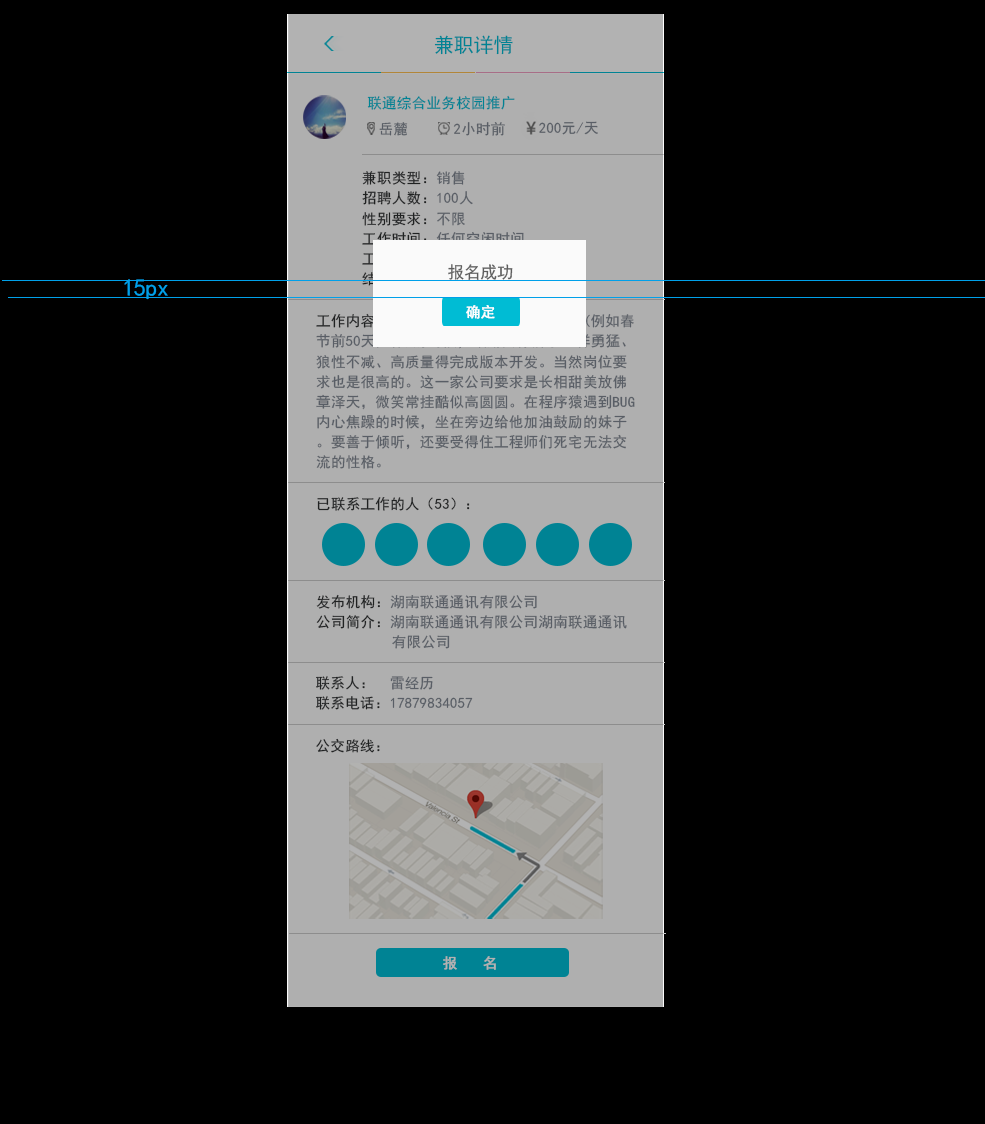
<style>
.page{position:relative;width:985px;height:1124px;background:#000000}
.page>*{position:absolute;margin:0}
.t1{font:20.1px "SimHei";letter-spacing:-0.02em;color:#008394}
.t2{font:14.5px "SimHei";letter-spacing:0.02em;color:#008394}
.t3{font:14.5px "SimHei";letter-spacing:0.02em;color:#595e66}
.t4{font:14.5px/20.1px "SimHei";letter-spacing:0.02em}
.t5{font:16.8px "SimHei";letter-spacing:-0.02em;color:#5d5d5d}
.t6{font:24px "SimHei";letter-spacing:-0.02em;color:#00a0e9}
.t7{font:14.5px "SimHei";letter-spacing:0.02em;color:#ffffff;font-weight:bold}
.t8{font:14.5px/20.1px "SimHei";letter-spacing:0.02em;color:#595e66}
.t9{font:14.5px "SimHei";letter-spacing:0.02em;color:#2e3031}
.t10{font:14.5px "SimHei";letter-spacing:0.02em;color:#b2b2b2;font-weight:bold}
</style>
<div class="page">
<p class="t1" style="left:434px;top:35px;width:79px;height:20px">兼职详情</p>
<p class="t2" style="left:367px;top:95px;width:148px;height:15px">联通综合业务校园推广</p>
<p class="t3" style="left:379px;top:122px;width:29px;height:14px">岳麓</p>
<p class="t3" style="left:453px;top:122px;width:52px;height:14px">2小时前</p>
<p class="t3" style="left:539px;top:121px;width:59px;height:14px">200元/天</p>
<p class="t4" style="left:362px;top:171px;width:162px;height:115px">兼职类型：销售<br>招聘人数：100人<br>性别要求：不限<br>工作时间：任何空闲时间<br>工作集合地点：桃花岭<br>结算方式：周结</p>
<p class="t5" style="left:448px;top:264px;width:65px;height:16px">报名成功</p>
<p class="t6" style="left:124px;top:279px;width:44px;height:21px">15px</p>
<p class="t7" style="left:466px;top:305px;width:29px;height:14px">确定</p>
<p class="t8" style="left:316px;top:313px;width:319px;height:156px">工作内容：鼓励程序员、攻城狮长期干活(例如春节前50天无休)的时候，鼓励其像狮子一样勇猛、狼性不减、高质量得完成版本开发。当然岗位要求也是很高的。这一家公司要求是长相甜美放佛章泽天，微笑常挂酷似高圆圆。在程序猿遇到BUG内心焦躁的时候，坐在旁边给他加油鼓励的妹子。要善于倾听，还要受得住工程师们死宅无法交流的性格。</p>
<p class="t9" style="left:317px;top:497px;width:153px;height:14px">已联系工作的人（53）：</p>
<p class="t8" style="left:316px;top:594px;width:311px;height:55px">发布机构：湖南联通通讯有限公司<br>公司简介：湖南联通通讯有限公司湖南联通通讯          有限公司</p>
<p class="t4" style="left:316px;top:676px;width:157px;height:34px">联系人：  雷经历<br>联系电话：17879834057</p>
<p class="t9" style="left:316px;top:738px;width:64px;height:15px">公交路线：</p>
<p class="t10" style="left:443px;top:956px;width:53px;height:14px">报  名</p>
</div>
